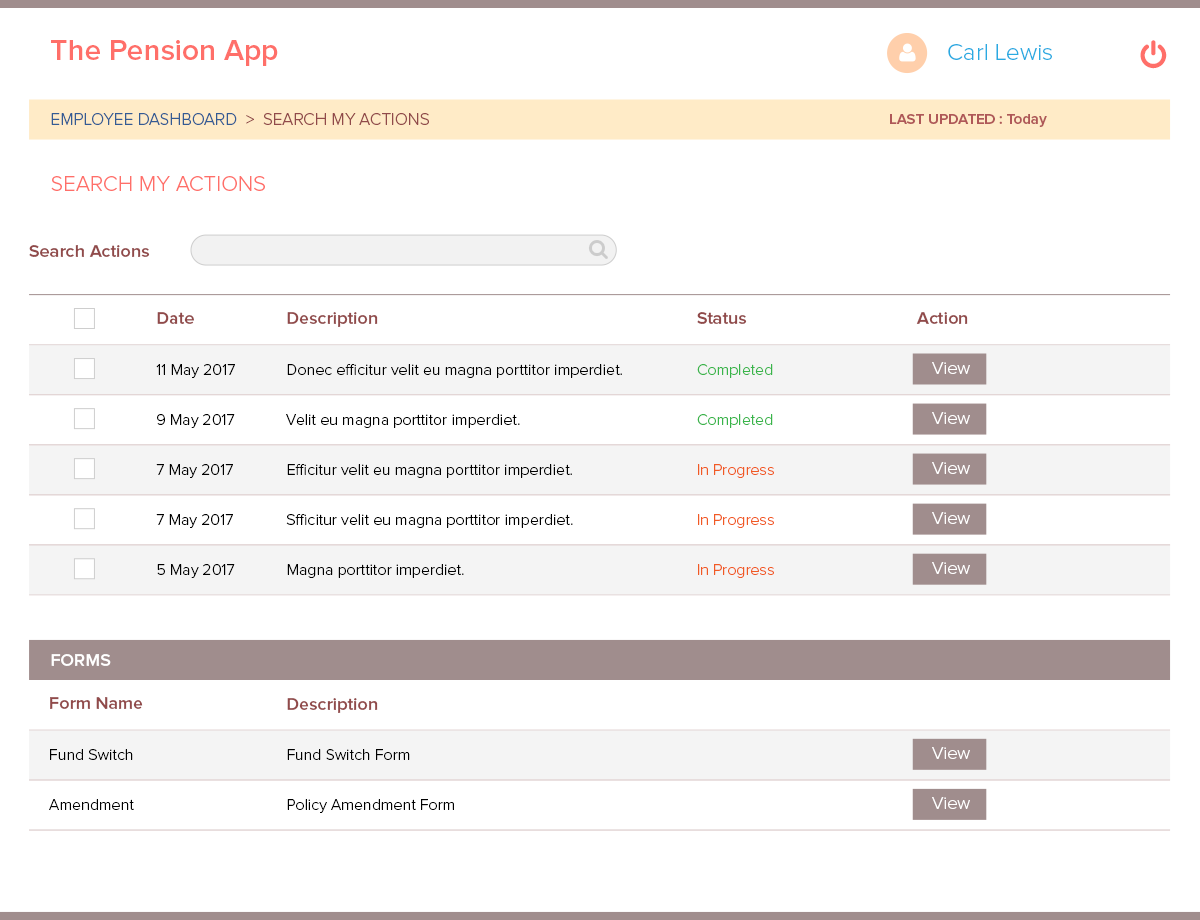
<style>
.page{position:relative;width:1200px;height:920px;background:#ffffff}
.page>*{position:absolute;margin:0}
.t1{font:30px "ProximaNova-Semibold";color:#ff6f69}
.t2{font:24px "ProximaNova-Light";color:#29abe2}
.t3{font:17px "ProximaNova-Light";color:#914a4a}
.t4{font:17px "ProximaNova-Light";color:#345b94}
.t5{font:15px "ProximaNova-Semibold";color:#af5858}
.t6{font:22px "ProximaNova-Light";color:#ff6f69}
.t7{font:18px "ProximaNova-Semibold";color:#914a4a}
.t8{font:17.1px "ProximaNova-Semibold";color:#914a4a;scale:1.05 1}
.t9{font:16px "ProximaNova-Light";color:#000000}
.t10{font:16px "ProximaNova-Light";color:#39b54a}
.t11{font:18px "ProximaNova-Light";color:#ffffff}
.t12{font:16px "ProximaNova-Light";color:#f15a24}
.t13{font:18px "ProximaNova-Semibold";color:#ffffff}
</style>
<div class="page">
<p class="t1" style="left:51px;top:40px;width:227px;height:26px">The Pension App</p>
<p class="t2" style="left:948px;top:44px;width:104px;height:16px">Carl Lewis</p>
<p class="t3" style="left:51px;top:113px;width:378px;height:12px"><span class="t4">EMPLOYEE DASHBOARD</span>  &gt;  SEARCH MY ACTIONS</p>
<p class="t5" style="left:890px;top:114px;width:157px;height:13px">LAST UPDATED : Today</p>
<p class="t6" style="left:51px;top:176px;width:214px;height:15px">SEARCH MY ACTIONS</p>
<p class="t7" style="left:29px;top:245px;width:121px;height:12px">Search Actions</p>
<p class="t7" style="left:157px;top:312px;width:37px;height:12px">Date</p>
<p class="t8" style="left:287px;top:312px;width:91px;height:15px">Description</p>
<p class="t7" style="left:697px;top:312px;width:50px;height:12px">Status</p>
<p class="t7" style="left:916px;top:312px;width:52px;height:12px">Action</p>
<p class="t9" style="left:156px;top:364px;width:79px;height:14px">11 May 2017</p>
<p class="t9" style="left:287px;top:364px;width:335px;height:14px">Donec efficitur velit eu magna porttitor imperdiet.</p>
<p class="t10" style="left:697px;top:364px;width:76px;height:14px">Completed</p>
<p class="t11" style="left:932px;top:362px;width:38px;height:12px">View</p>
<p class="t9" style="left:157px;top:414px;width:78px;height:14px">9 May 2017</p>
<p class="t9" style="left:286px;top:414px;width:234px;height:14px">Velit eu magna porttitor imperdiet.</p>
<p class="t10" style="left:697px;top:414px;width:76px;height:14px">Completed</p>
<p class="t11" style="left:932px;top:412px;width:38px;height:12px">View</p>
<p class="t11" style="left:932px;top:462px;width:38px;height:12px">View</p>
<p class="t9" style="left:156px;top:464px;width:77px;height:14px">7 May 2017</p>
<p class="t9" style="left:287px;top:464px;width:285px;height:14px">Efficitur velit eu magna porttitor imperdiet.</p>
<p class="t12" style="left:698px;top:464px;width:76px;height:14px">In Progress</p>
<p class="t9" style="left:156px;top:514px;width:77px;height:14px">7 May 2017</p>
<p class="t9" style="left:286px;top:514px;width:287px;height:14px">Sfficitur velit eu magna porttitor imperdiet.</p>
<p class="t12" style="left:698px;top:514px;width:76px;height:14px">In Progress</p>
<p class="t11" style="left:932px;top:512px;width:38px;height:12px">View</p>
<p class="t9" style="left:157px;top:564px;width:78px;height:14px">5 May 2017</p>
<p class="t9" style="left:287px;top:564px;width:177px;height:14px">Magna porttitor imperdiet.</p>
<p class="t12" style="left:698px;top:564px;width:76px;height:14px">In Progress</p>
<p class="t11" style="left:932px;top:562px;width:38px;height:12px">View</p>
<p class="t13" style="left:51px;top:654px;width:60px;height:12px">FORMS</p>
<p class="t7" style="left:50px;top:697px;width:93px;height:12px">Form Name</p>
<p class="t8" style="left:287px;top:698px;width:91px;height:15px">Description</p>
<p class="t9" style="left:50px;top:749px;width:83px;height:11px">Fund Switch</p>
<p class="t9" style="left:287px;top:749px;width:123px;height:11px">Fund Switch Form</p>
<p class="t11" style="left:932px;top:747px;width:38px;height:12px">View</p>
<p class="t11" style="left:932px;top:797px;width:38px;height:12px">View</p>
<p class="t9" style="left:49px;top:799px;width:85px;height:11px">Amendment</p>
<p class="t9" style="left:287px;top:799px;width:167px;height:14px">Policy Amendment Form</p>
</div>
